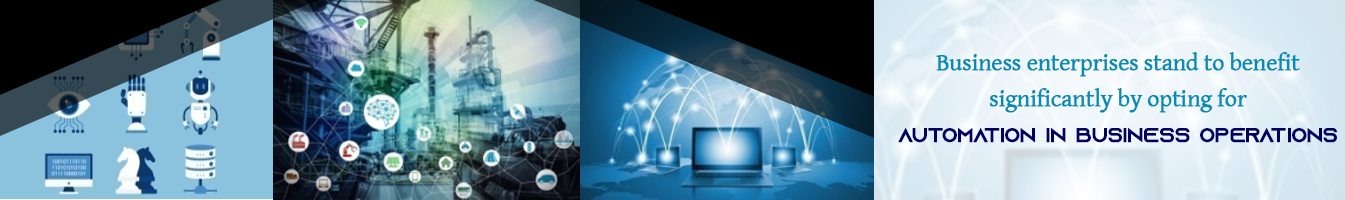
<style>
.page{position:relative;width:1345px;height:200px}
.page>*{position:absolute;margin:0}
.t1{font:24px/36px "GentiumBasic";letter-spacing:-0.025em;color:#048cb8;font-weight:bold}
.t2{font:20px/36px "AzonixRegular";letter-spacing:-0.025em;color:#000062;font-weight:bold}
</style>
<div class="page">
<p class="t1" style="left:898px;top:52px;width:439px;height:91px;text-align:center">Business enterprises stand to benefit <br>significantly by opting for <br><span class="t2">Automation in business operations</span></p>
</div>
